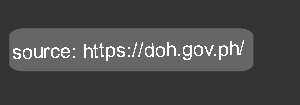
<style>
.page{position:relative;width:300px;height:105px;background:#333333}
.page>*{position:absolute;margin:0}
.t1{font:20px "ArialMT";color:#ffffff}
</style>
<div class="page">
<p class="t1" style="left:13px;top:40px;width:231px;height:21px;rotate:-1deg">source: https://doh.gov.ph/</p>
</div>
